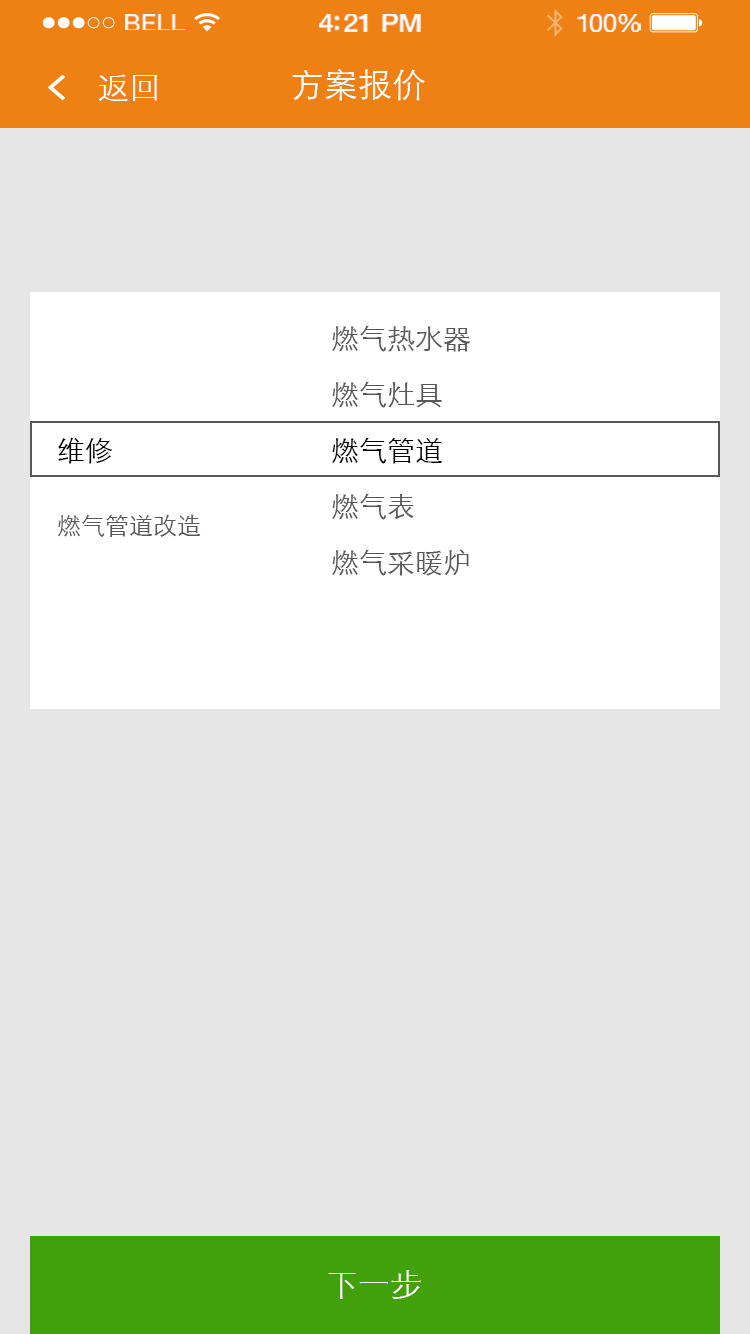
<style>
.page{position:relative;width:750px;height:1334px;background:#e6e6e6}
.page>*{position:absolute;margin:0}
.t1{font:23.3px "HelveticaNeue";letter-spacing:0.02em;color:#ffffff;scale:1.06 1}
.t2{font:25.3px "HelveticaNeue-Medium";letter-spacing:-0.02em;color:#ffffff;scale:1.06 1}
.t3{font:24.3px "HelveticaNeue";letter-spacing:-0.02em;color:#ffffff;scale:1.06 1}
.t4{font:32px "STXihei";color:#ffffff}
.t5{font:34px "STXihei";color:#ffffff}
.t6{font:28px/56px "STXihei";color:#595757}
.t7{font:28px/56px "STXihei";color:#000000}
.t8{font:28px "STXihei";color:#000000}
.t9{font:24px "STXihei";color:#595757}
</style>
<div class="page">
<p class="t1" style="left:125px;top:14px;width:61px;height:16px">BELL</p>
<p class="t2" style="left:319px;top:14px;width:102px;height:18px">4:21 PM</p>
<p class="t3" style="left:577px;top:14px;width:64px;height:18px">100%</p>
<p class="t4" style="left:98px;top:74px;width:59px;height:27px">返回</p>
<p class="t5" style="left:292px;top:69px;width:133px;height:32px">方案报价</p>
<p class="t6" style="left:332px;top:325px;width:139px;height:251px">燃气热水器<br>燃气灶具<br><span class="t7">燃气管道<br></span>燃气表<br>燃气采暖炉</p>
<p class="t8" style="left:58px;top:437px;width:55px;height:27px">维修</p>
<p class="t9" style="left:58px;top:514px;width:143px;height:23px">燃气管道改造</p>
<p class="t4" style="left:328px;top:1270px;width:93px;height:29px">下一步</p>
</div>
